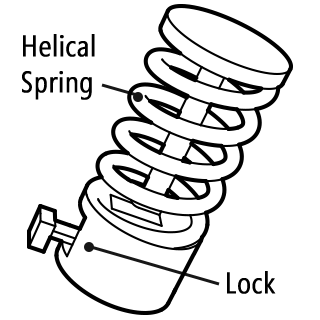
<style>
.page{position:relative;width:320px;height:320px;background:#ffffff}
.page>*{position:absolute;margin:0}
.t1{font:30px "SegoeCondensed";color:#000000;font-weight:bold}
</style>
<div class="page">
<p class="t1" style="left:22px;top:34px;width:73px;height:66px">Helical <br>Spring</p>
<p class="t1" style="left:227px;top:271px;width:49px;height:23px">Lock</p>
</div>
